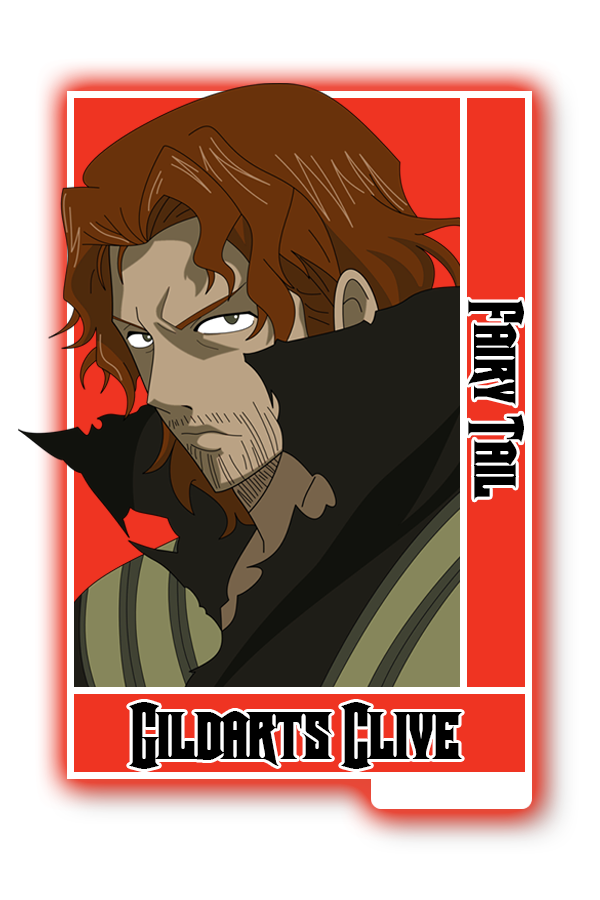
<style>
.page{position:relative;width:600px;height:900px;background:#ffffff}
.page>*{position:absolute;margin:0}
.t1{font:61.5px "Crown-Title";color:#000000}
.t2{font:70.1px "Crown-Title";color:#000000}
</style>
<div class="page">
<p class="t1" style="left:468px;top:299px;width:56px;height:201px;rotate:90deg">Fairy Tail</p>
<p class="t2" style="left:129px;top:702px;width:333px;height:67px">Gildarts Clive</p>
</div>
